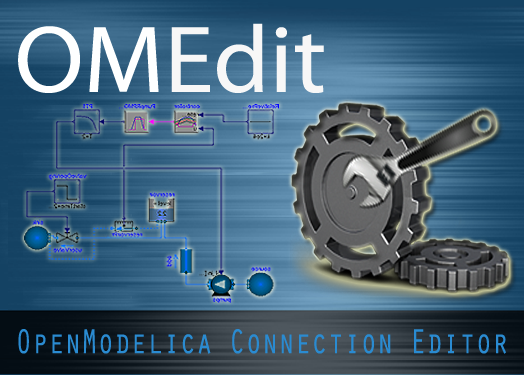
<style>
.page{position:relative;width:524px;height:375px}
.page>*{position:absolute;margin:0}
.t1{font:96px "MyriadPro-Regular";color:#f7f7f7;scale:1.04 1}
.t2{font:96px "MyriadPro-Regular";color:#feffff;scale:1.04 1}
.t3{font:35.6px "OratorStd";color:#2a8bd1;scale:0.77 1}
</style>
<div class="page">
<p class="t1" style="left:18px;top:23px;width:306px;height:70px"><span class="t2">OM</span>Edit</p>
<p class="t3" style="left:18px;top:329px;width:488px;height:25px">OpenModelica Connection Editor</p>
</div>
